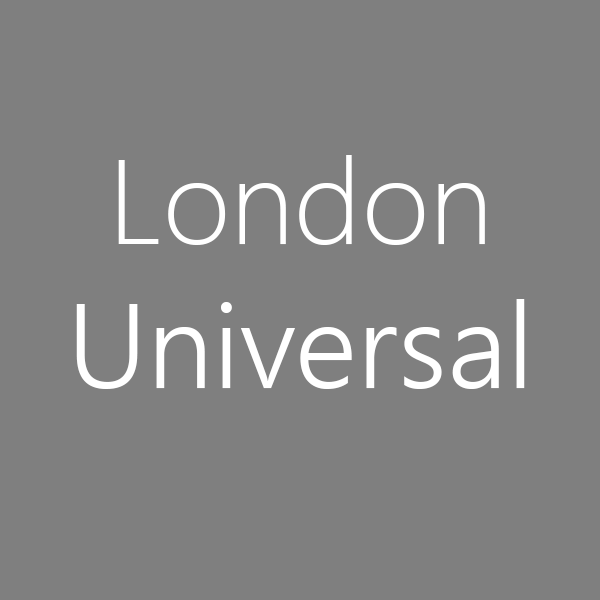
<style>
.page{position:relative;width:600px;height:600px;background:#7f7f7f}
.page>*{position:absolute;margin:0}
.t1{font:120px "SegoeUI-Semilight";color:#ffffff}
.t2{font:120px "SegoeUI-Light";color:#ffffff}
</style>
<div class="page">
<p class="t1" style="left:76px;top:155px;width:449px;height:234px;text-align:center"><span class="t2">London </span>Universal</p>
</div>
